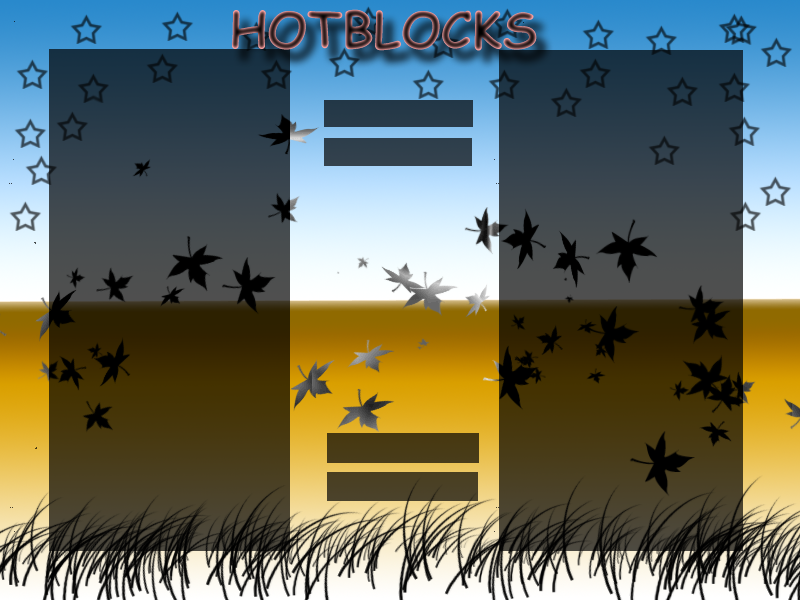
<style>
.page{position:relative;width:800px;height:600px}
.page>*{position:absolute;margin:0}
.t1{font:50px "ComicSansMS-Bold"}
</style>
<div class="page">
<p class="t1" style="left:232px;top:9px;width:305px;height:42px">HOTBLOCKS</p>
</div>
